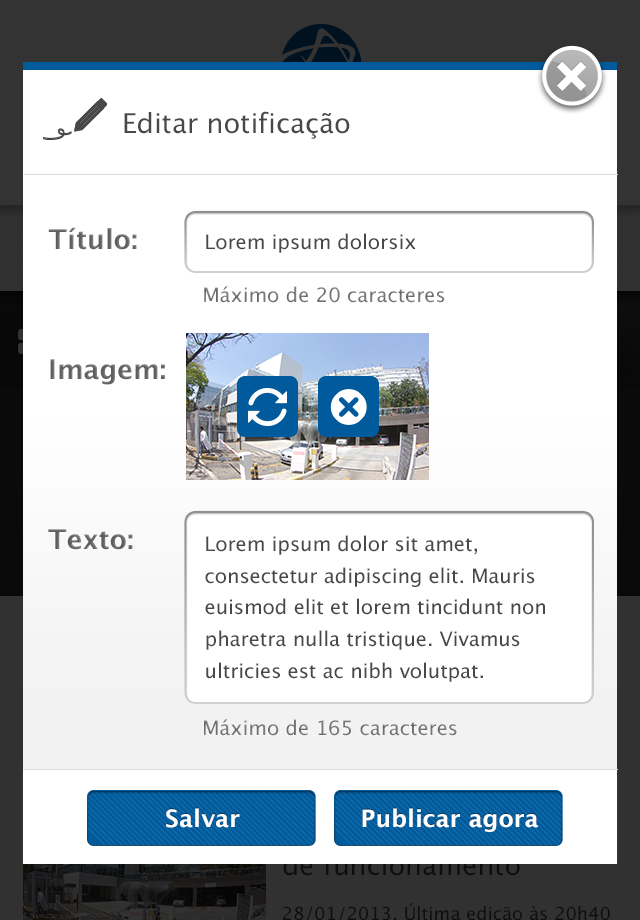
<style>
.page{position:relative;width:640px;height:920px;background:#ffffff}
.page>*{position:absolute;margin:0}
.t1{font:27.2px "LucidaGrande";color:#484848}
.t2{font:27.2px "LucidaGrande-Bold";color:#5d5d5d}
.t3{font:19.9px "LucidaGrande";color:#484848}
.t4{font:19.9px "LucidaGrande";color:#767676}
.t5{font:19.9px/31.7px "LucidaGrande";color:#484848}
.t6{font:24px "LucidaGrande-Bold";color:#ffffff}
</style>
<div class="page">
<p class="t1" style="left:124px;top:111px;width:226px;height:28px">Editar notificação</p>
<p class="t2" style="left:48px;top:227px;width:89px;height:23px">Título:</p>
<p class="t3" style="left:206px;top:233px;width:210px;height:20px">Lorem ipsum dolorsix</p>
<p class="t4" style="left:204px;top:286px;width:241px;height:17px">Máximo de 20 caracteres</p>
<p class="t2" style="left:50px;top:359px;width:115px;height:26px">Imagem:</p>
<p class="t2" style="left:48px;top:529px;width:85px;height:21px">Texto:</p>
<p class="t5" style="left:205px;top:535px;width:340px;height:147px">Lorem ipsum dolor sit amet, consectetur adipiscing elit. Mauris euismod elit et lorem tincidunt non pharetra nulla tristique. Vivamus ultricies est ac nibh volutpat.</p>
<p class="t4" style="left:204px;top:719px;width:253px;height:17px">Máximo de 165 caracteres</p>
<p class="t6" style="left:166px;top:808px;width:74px;height:20px">Salvar</p>
<p class="t6" style="left:362px;top:808px;width:176px;height:24px">Publicar agora</p>
</div>
